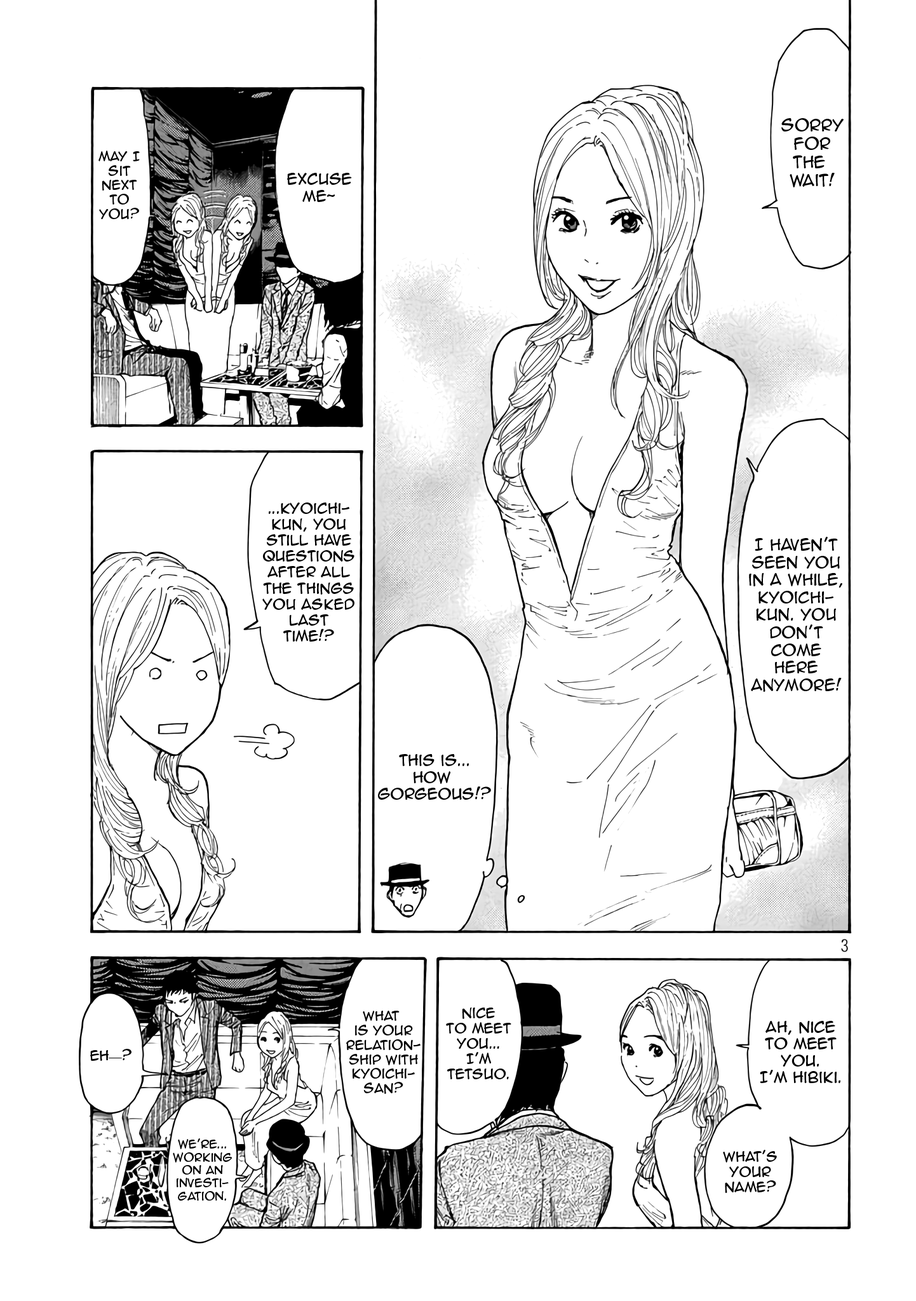
<style>
.page{position:relative;width:916px;height:1301px;background:#ffffff}
.page>*{position:absolute;margin:0}
.t1{font:15.3px "AnimeAce2.0BB";color:#000000}
.t2{font:12.1px "AnimeAce2.0BB";color:#000000}
.t3{font:14px "AnimeAce2.0BB";color:#000000}
.t4{font:13.3px "AnimeAce2.0BB";color:#000000}
.t5{font:14.6px "AnimeAce2.0BB";color:#000000}
.t6{font:12.7px "AnimeAce2.0BB";color:#000000}
.t7{font:12.7px "TimesNewRomanPSMT";color:#000000}
.t8{font:10.8px "AnimeAce2.0BB";color:#000000}
</style>
<div class="page">
<p class="t1" style="left:782px;top:118px;width:62px;height:69px;text-align:center">sorry<br>for<br>the <br>wait!</p>
<p class="t2" style="left:98px;top:151px;width:42px;height:68px;text-align:center">may I<br>Sit<br>Next<br>To<br>YOU?</p>
<p class="t3" style="left:287px;top:173px;width:65px;height:29px;text-align:center">excuse<br>me~</p>
<p class="t4" style="left:262px;top:503px;width:93px;height:139px;text-align:center">...kyoichi-<br>kun, you<br>still have<br>questions<br>after all<br>the things<br>you asked<br>last<br>time!?</p>
<p class="t5" style="left:749px;top:537px;width:94px;height:155px;text-align:center">I haven’t<br>seen you<br>in a while,<br>kyoichi-<br>kun. you<br>don’t<br>come<br>here<br>anymore!</p>
<p class="t3" style="left:378px;top:754px;width:113px;height:46px;text-align:center">this is...<br>how <br>gorgeous!?</p>
<p class="t2" style="left:346px;top:1011px;width:75px;height:83px;text-align:center">What <br>is your<br>relation-<br>ship with<br>Kyoichi-<br>san?</p>
<p class="t6" style="left:446px;top:1008px;width:66px;height:72px;text-align:center">nice<br>to meet<br>you...<br>I’m<br>Tetsuo.</p>
<p class="t3" style="left:760px;top:1021px;width:81px;height:62px;text-align:center">Ah, Nice<br>to meet<br>you.<br>I’m Hibiki.</p>
<p class="t6" style="left:90px;top:1049px;width:42px;height:12px">eh<span class="t7">—</span>?</p>
<p class="t8" style="left:173px;top:1139px;width:59px;height:62px;text-align:center">We’re...<br>working<br>on an<br>investi-<br>gation.</p>
<p class="t6" style="left:723px;top:1150px;width:54px;height:43px;text-align:center">what’s<br>your<br>name?</p>
</div>
